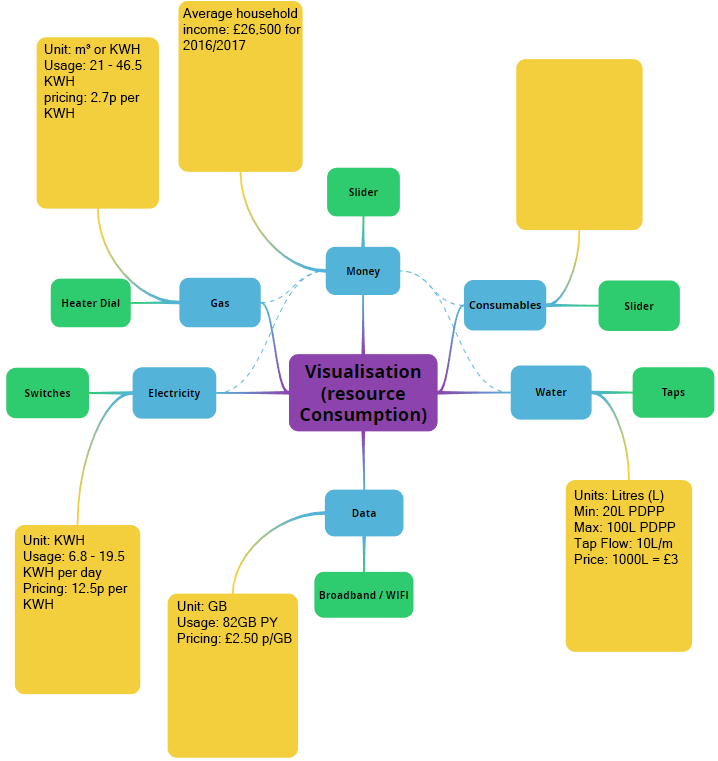
<style>
.page{position:relative;width:718px;height:761px;background:#ffffff}
.page>*{position:absolute;margin:0}
.t1{font:13.3px "MicrosoftSansSerif";color:#000000}
</style>
<div class="page">
<p class="t1" style="left:182px;top:8px;width:119px;height:44px">Average household<br>income: £26,500 for<br>2016/2017</p>
<p class="t1" style="left:44px;top:44px;width:98px;height:74px">Unit: m³ or KWH<br>Usage: 21 - 46.5<br>KWH<br>pricing: 2.7p per<br>KWH</p>
<p class="t1" style="left:574px;top:490px;width:104px;height:75px">Units: Litres (L)<br>Min: 20L PDPP<br>Max: 100L PDPP<br>Tap Flow: 10L/m<br>Price: 1000L = £3</p>
<p class="t1" style="left:23px;top:535px;width:105px;height:74px">Unit: KWH<br>Usage: 6.8 - 19.5<br>KWH per day<br>Pricing: 12.5p per<br>KWH</p>
<p class="t1" style="left:177px;top:601px;width:115px;height:45px">Unit: GB<br>Usage: 82GB PY<br>Pricing: £2.50 p/GB</p>
</div>
